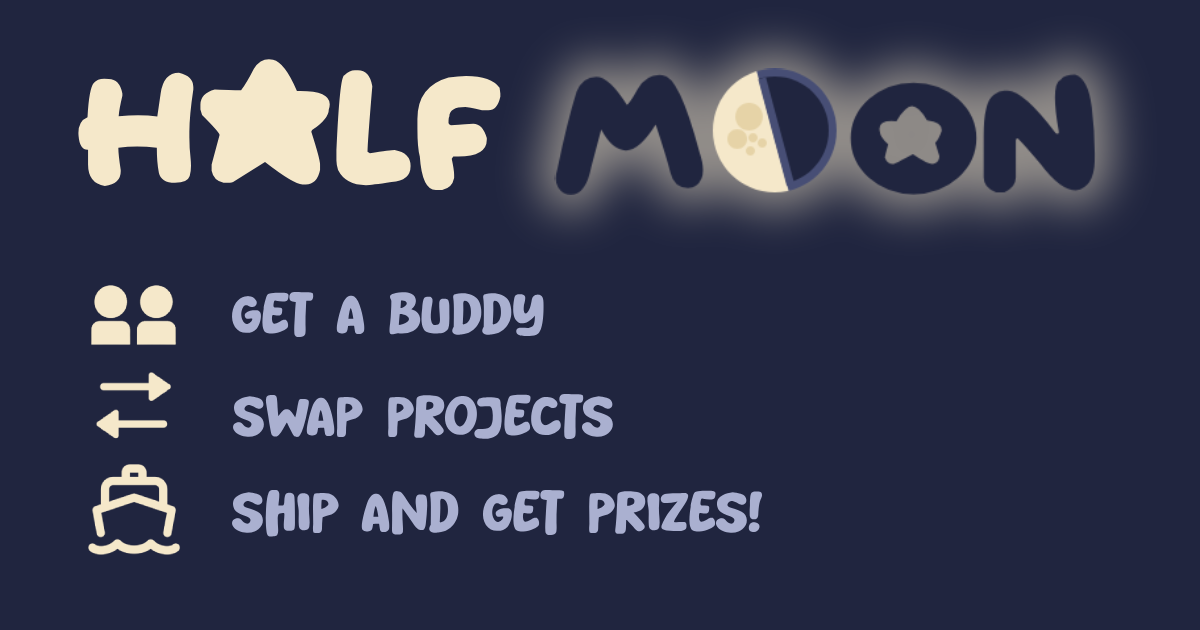
<style>
.page{position:relative;width:1200px;height:630px;background:#20253f}
.page>*{position:absolute;margin:0}
.t1{font:140px "Starborn";color:#f5e8ca}
.t2{font:50px "MatchaStyle";color:#aab0d0;font-weight:bold}
</style>
<div class="page">
<p class="t1" style="left:78px;top:59px;width:423px;height:131px">Half</p>
<p class="t2" style="left:229px;top:291px;width:315px;height:47px">Get a Buddy</p>
<p class="t2" style="left:232px;top:393px;width:382px;height:47px">Swap Projects</p>
<p class="t2" style="left:231px;top:489px;width:532px;height:48px">Ship and get Prizes!</p>
</div>
